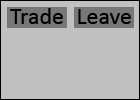
<style>
.page{position:relative;width:140px;height:100px;background:#c0c0c0}
.page>*{position:absolute;margin:0}
.t1{font:24px "Calibri";color:#000000}
</style>
<div class="page">
<p class="t1" style="left:10px;top:8px;width:53px;height:16px">Trade</p>
<p class="t1" style="left:78px;top:9px;width:53px;height:15px">Leave</p>
</div>
